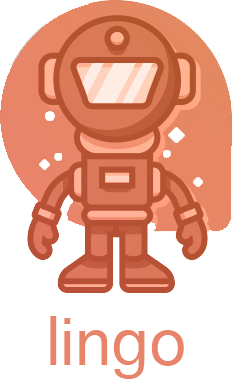
<style>
.page{position:relative;width:232px;height:379px;background:#ffffff}
.page>*{position:absolute;margin:0}
.t1{font:62.2px "Sathu";color:#e8846a}
</style>
<div class="page">
<p class="t1" style="left:50px;top:316px;width:134px;height:63px">lingo</p>
</div>
